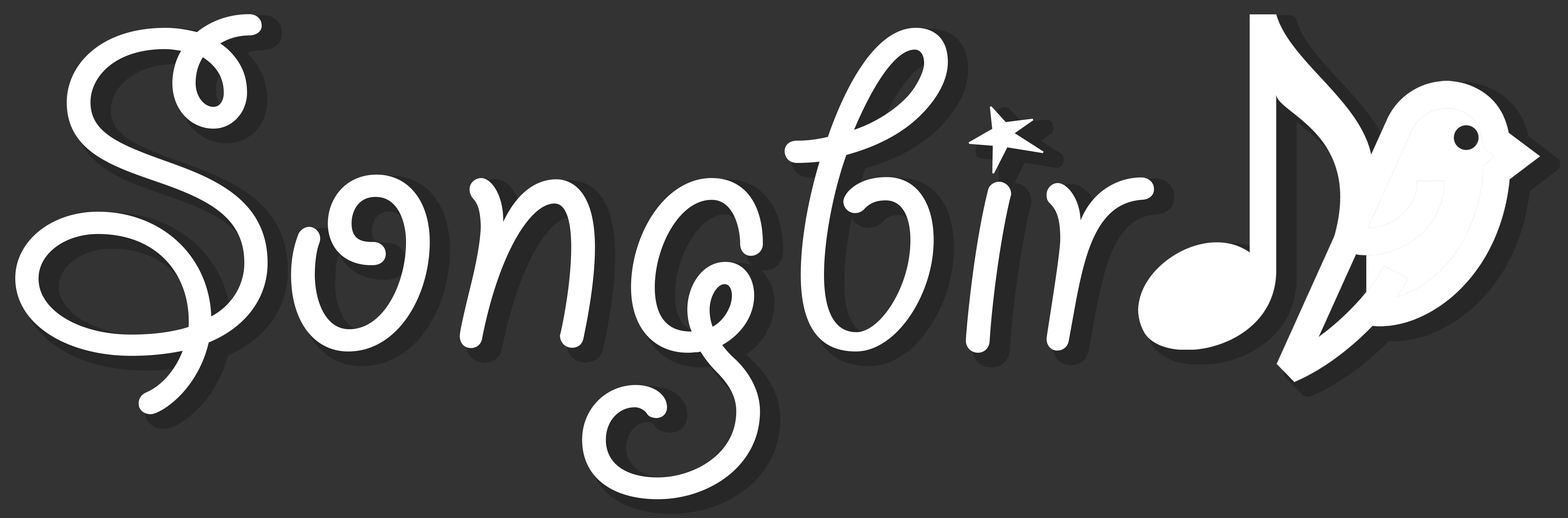
<style>
.page{position:relative;width:1568px;height:518px;background:#333333}
.page>*{position:absolute;margin:0}
.t1{font:489.5px "GiddyupStd";color:#ffffff;font-weight:bold}
</style>
<div class="page">
<p class="t1" style="left:15px;top:14px;width:1139px;height:485px">Songbir</p>
</div>
